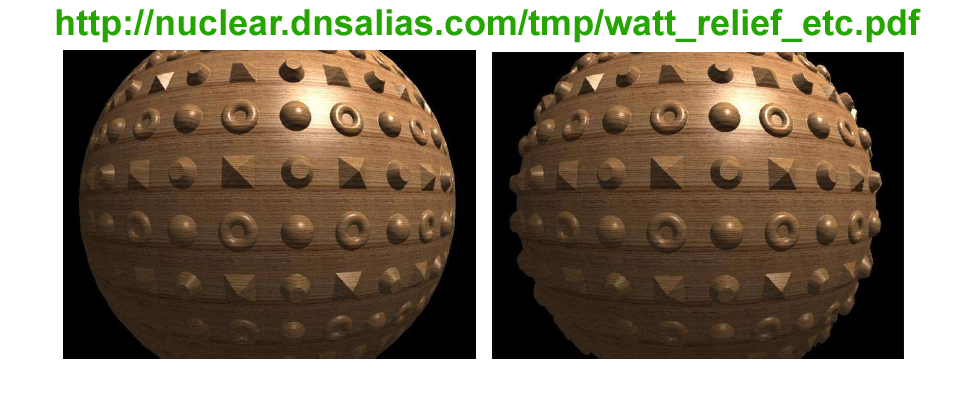
<style>
.page{position:relative;width:956px;height:408px;background:#ffffff}
.page>*{position:absolute;margin:0}
.t1{font:36px "Arial-BoldMT";color:#25a500}
</style>
<div class="page">
<p class="t1" style="left:56px;top:8px;width:865px;height:35px">http://nuclear.dnsalias.com/tmp/watt_relief_etc.pdf</p>
</div>
